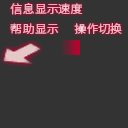
<style>
.page{position:relative;width:128px;height:128px;background:#333333}
.page>*{position:absolute;margin:0}
.t1{font:11.4px "SourceHanSansSC-Regular";color:#e1b2be;scale:1.05 1}
</style>
<div class="page">
<p class="t1" style="left:10px;top:3px;width:73px;height:12px">信息显示速度</p>
<p class="t1" style="left:10px;top:23px;width:49px;height:11px">帮助显示</p>
<p class="t1" style="left:74px;top:23px;width:48px;height:11px">操作切换</p>
</div>
